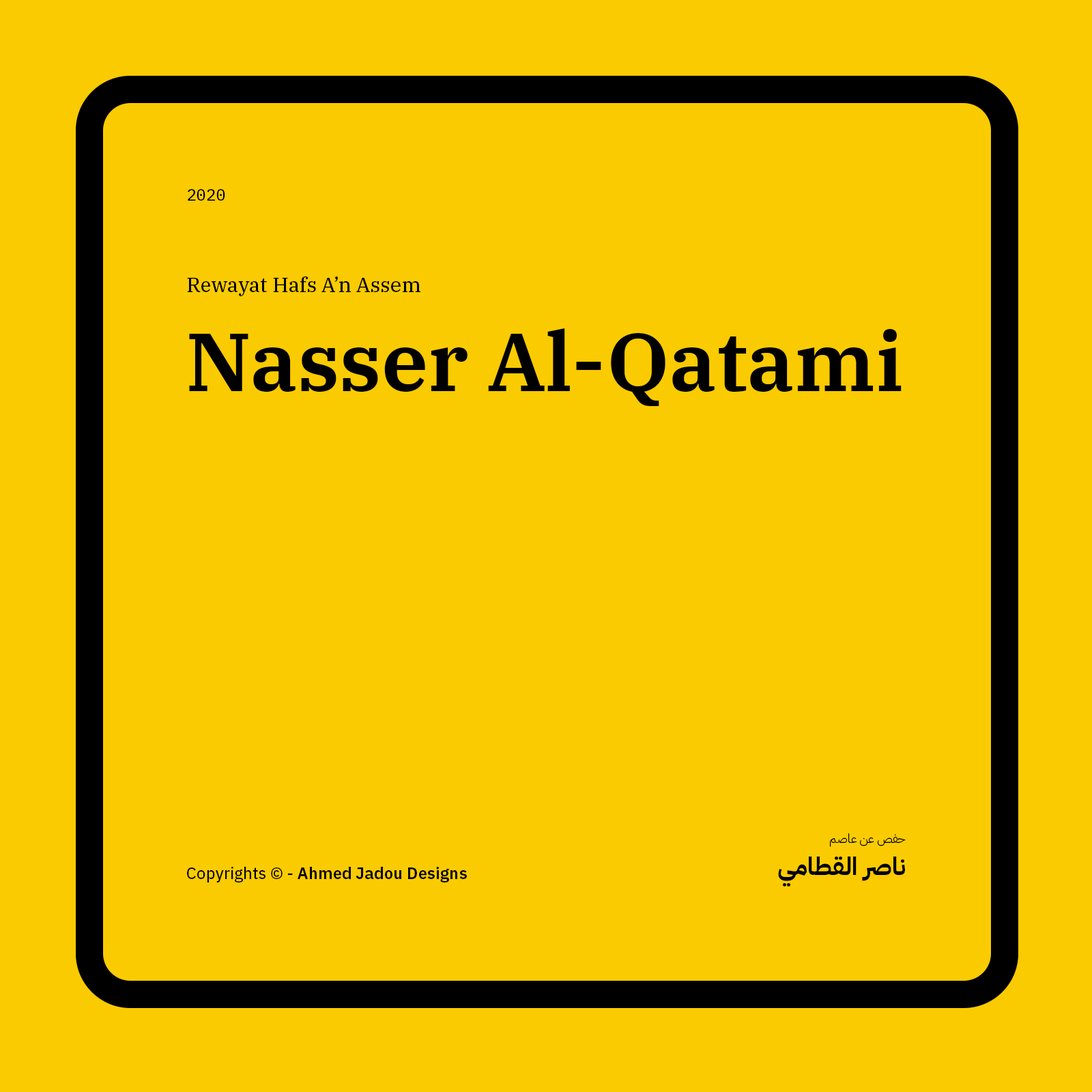
<style>
.page{position:relative;width:1092px;height:1092px;background:#facb00}
.page>*{position:absolute;margin:0}
.t1{font:16.4px "IBMPlexMono-Text";color:#000000}
.t2{font:20.5px "IBMPlexSerif-Text";color:#000000}
.t3{font:81.9px "IBMPlexSerif-SemiBold";color:#000000}
.t4{font:12.3px "IBMPlexArabic-Light";color:#000000}
.t5{font:24.6px "IBMPlexArabic-Bold";color:#000000}
.t6{font:16.4px "IBMPlexSans-SemiBold";color:#000000}
.t7{font:16.4px "IBMPlexSans-Text";color:#000000}
</style>
<div class="page">
<p class="t1" style="left:188px;top:189px;width:37px;height:12px">2020</p>
<p class="t2" style="left:187px;top:276px;width:233px;height:20px">Rewayat Hafs A’n Assem</p>
<p class="t3" style="left:189px;top:328px;width:713px;height:78px">Nasser Al-Qatami</p>
<p class="t4" style="left:830px;top:833px;width:76px;height:14px">حفص عن عاصم</p>
<p class="t5" style="left:778px;top:857px;width:127px;height:30px">ناصر القطامي</p>
<p class="t6" style="left:187px;top:867px;width:280px;height:15px"><span class="t7">Copyrights © - </span>Ahmed Jadou Designs</p>
</div>
